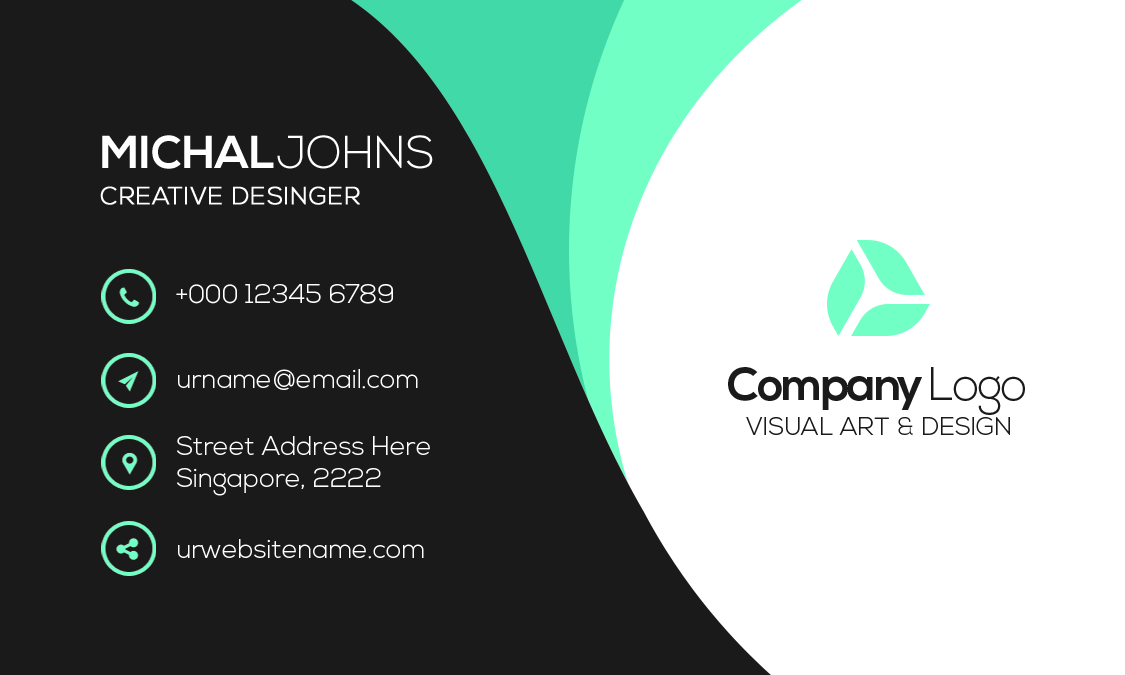
<style>
.page{position:relative;width:1125px;height:675px;background:#1a1a1a}
.page>*{position:absolute;margin:0}
.t1{font:46.1px "NexaBold";color:#ffffff}
.t2{font:46.1px "NexaLight";color:#ffffff}
.t3{font:24.7px "NexaLight";letter-spacing:0.02em;color:#ffffff;font-weight:bold}
.t4{font:26.2px "NexaLight";color:#ffffff;text-transform:uppercase}
.t5{font:26.2px "NexaLight";color:#ffffff}
.t6{font:46.7px "NexaBold";letter-spacing:-0.05em;color:#1a1a1a}
.t7{font:46.7px "NexaLight";letter-spacing:-0.05em;color:#1a1a1a}
.t8{font:25px "NexaLight";color:#1a1a1a}
.t9{font:26.2px/32px "NexaLight";color:#ffffff}
</style>
<div class="page">
<p class="t1" style="left:102px;top:135px;width:331px;height:34px">MICHAL<span class="t2">JOHNS</span></p>
<p class="t3" style="left:100px;top:186px;width:260px;height:19px">CREATIVE DESINGER</p>
<p class="t4" style="left:176px;top:284px;width:217px;height:20px">+000 12345 6789</p>
<p class="t5" style="left:178px;top:369px;width:240px;height:21px">urname@email.com</p>
<p class="t6" style="left:728px;top:367px;width:297px;height:48px">Company <span class="t7">Logo</span></p>
<p class="t8" style="left:746px;top:417px;width:264px;height:18px">VISUAL ART &amp; DESIGN</p>
<p class="t9" style="left:177px;top:436px;width:253px;height:60px">Street Address Here<br>Singapore, 2222</p>
<p class="t5" style="left:178px;top:539px;width:246px;height:20px">urwebsitename.com</p>
</div>
